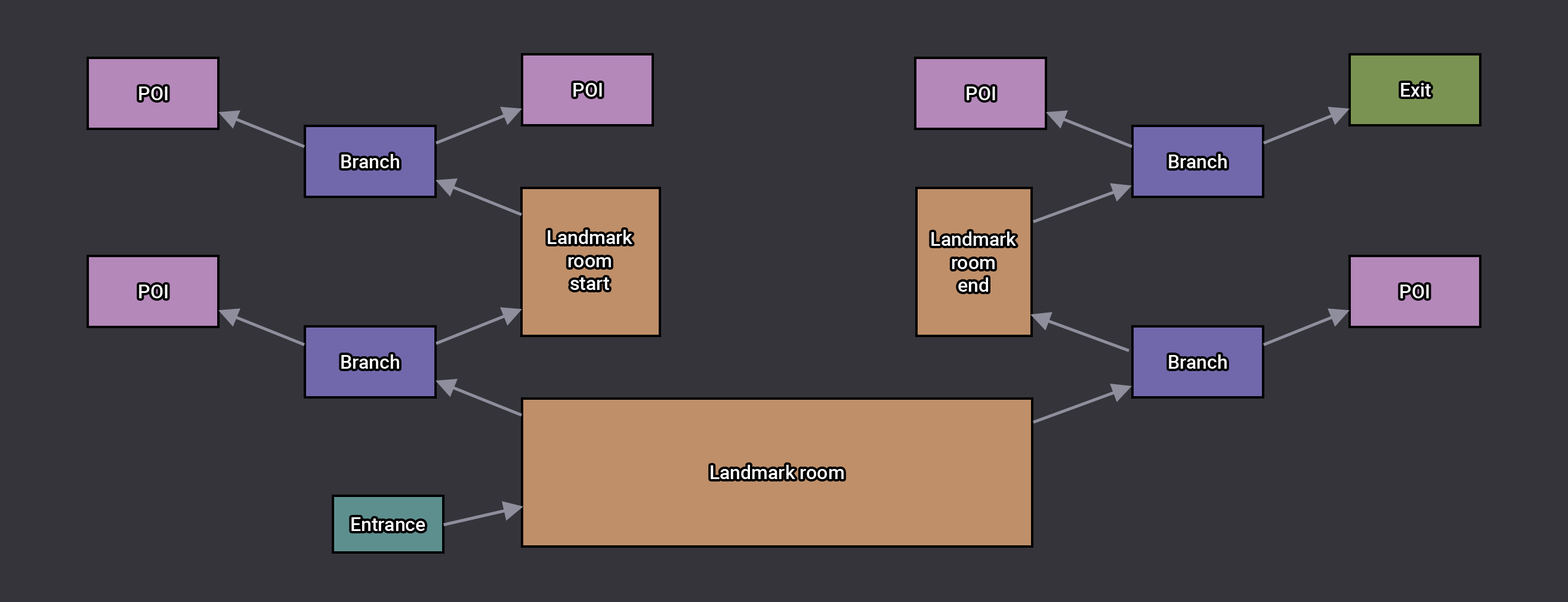
<style>
.page{position:relative;width:1568px;height:602px;background:#34343a}
.page>*{position:absolute;margin:0}
.t1{font:19.1px "Roboto-Medium";color:#ffffff}
</style>
<div class="page">
<p class="t1" style="left:139px;top:87px;width:29px;height:13px">POI</p>
<p class="t1" style="left:573px;top:83px;width:29px;height:14px">POI</p>
<p class="t1" style="left:967px;top:87px;width:28px;height:13px">POI</p>
<p class="t1" style="left:1401px;top:83px;width:30px;height:14px">Exit</p>
<p class="t1" style="left:341px;top:154px;width:58px;height:14px">Branch</p>
<p class="t1" style="left:1169px;top:154px;width:58px;height:14px">Branch</p>
<p class="t1" style="left:548px;top:230px;width:84px;height:60px;text-align:center">Landmark<br>room<br>start</p>
<p class="t1" style="left:931px;top:232px;width:85px;height:60px;text-align:center">Landmark<br>room<br>end</p>
<p class="t1" style="left:139px;top:285px;width:29px;height:13px">POI</p>
<p class="t1" style="left:1400px;top:285px;width:29px;height:13px">POI</p>
<p class="t1" style="left:341px;top:354px;width:58px;height:15px">Branch</p>
<p class="t1" style="left:1169px;top:354px;width:58px;height:15px">Branch</p>
<p class="t1" style="left:711px;top:465px;width:133px;height:14px">Landmark room</p>
<p class="t1" style="left:351px;top:517px;width:74px;height:14px">Entrance</p>
</div>
